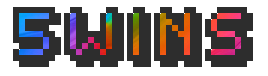
<style>
.page{position:relative;width:268px;height:76px;background:#2d2d2d}
.page>*{position:absolute;margin:0}
.t1{font:48px "Fipps-Regular";letter-spacing:0.06em;color:#2d2d2d}
</style>
<div class="page">
<p class="t1" style="left:13px;top:7px;width:240px;height:60px">5WINS</p>
</div>
